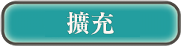
<style>
.page{position:relative;width:181px;height:46px;background:#239e9f}
.page>*{position:absolute;margin:0}
.t1{font:24px "RyuminPr6N-ExBold";color:#fff8f3}
</style>
<div class="page">
<p class="t1" style="left:66px;top:11px;width:48px;height:24px">擴充</p>
</div>
